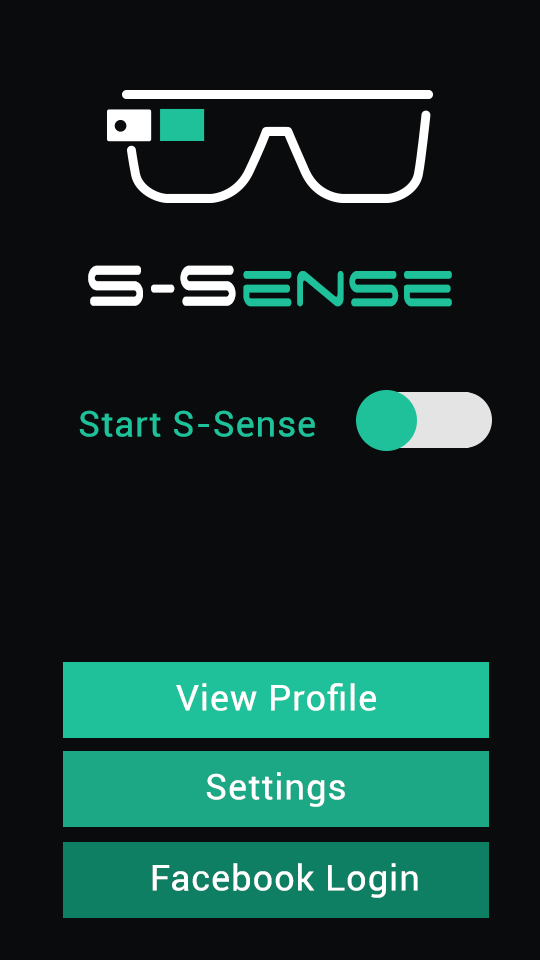
<style>
.page{position:relative;width:540px;height:960px;background:#090b0c}
.page>*{position:absolute;margin:0}
.t1{font:81.2px "SpaceAge";color:#1ec199;scale:0.73 1}
.t2{font:91.2px "SpaceAge";color:#ffffff;font-weight:bold;scale:0.73 1}
.t3{font:81.2px "SpaceAge";color:#ffffff;scale:0.73 1}
.t4{font:35.5px "Roboto-Regular";color:#1ec199;font-weight:bold}
.t5{font:35.5px "Roboto-Regular";color:#ffffff;font-weight:bold}
</style>
<div class="page">
<p class="t1" style="left:88px;top:265px;width:364px;height:42px"><span class="t2">S</span><span class="t3">-</span><span class="t2">S</span>ense</p>
<p class="t4" style="left:79px;top:410px;width:236px;height:27px">Start S-Sense</p>
<p class="t5" style="left:176px;top:683px;width:200px;height:28px">View Profile</p>
<p class="t5" style="left:206px;top:772px;width:139px;height:35px">Settings</p>
<p class="t5" style="left:152px;top:863px;width:266px;height:35px">Facebook Login</p>
</div>
